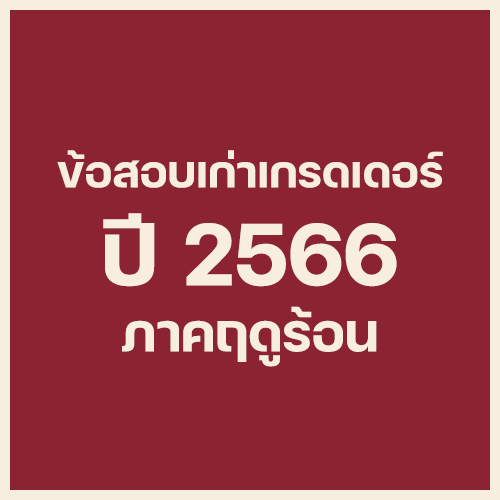
<style>
.page{position:relative;width:500px;height:500px;background:#8b2332}
.page>*{position:absolute;margin:0}
.t1{font:60px "FCMinimalBold";color:#f8eedf}
.t2{font:120px "FCMinimalBold";color:#f8eedf}
.t3{font:72px "FCMinimalBold";color:#f8eedf}
</style>
<div class="page">
<p class="t1" style="left:57px;top:150px;width:386px;height:38px">ข้อสอบเก่าเกรดเดอร์</p>
<p class="t2" style="left:103px;top:213px;width:294px;height:74px">ปี 2566</p>
<p class="t3" style="left:122px;top:306px;width:255px;height:61px">ภาคฤดูร้อน</p>
</div>
